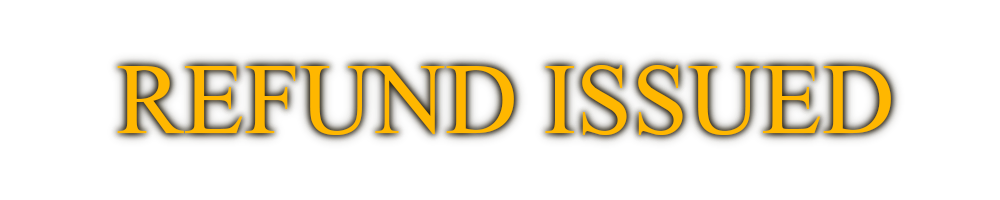
<style>
.page{position:relative;width:1000px;height:200px;background:#ffffff}
.page>*{position:absolute;margin:0}
.t1{font:150px "Microsoft-Himalaya";color:#ffb700}
</style>
<div class="page">
<p class="t1" style="left:117px;top:65px;width:774px;height:70px">REFUND ISSUED</p>
</div>
